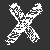
<style>
.page{position:relative;width:50px;height:50px;background:#333333}
.page>*{position:absolute;margin:0}
.t1{font:60px "Drawing-Guides";color:#ffffff}
</style>
<div class="page">
<p class="t1" style="left:5px;top:3px;width:38px;height:42px">X</p>
</div>
